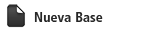
<style>
.page{position:relative;width:150px;height:32px;background:#ffffff}
.page>*{position:absolute;margin:0}
.t1{font:14px "FrutigerLT-BoldCn";letter-spacing:0.005em;color:#272727}
</style>
<div class="page">
<p class="t1" style="left:34px;top:12px;width:69px;height:10px">Nueva Base</p>
</div>
